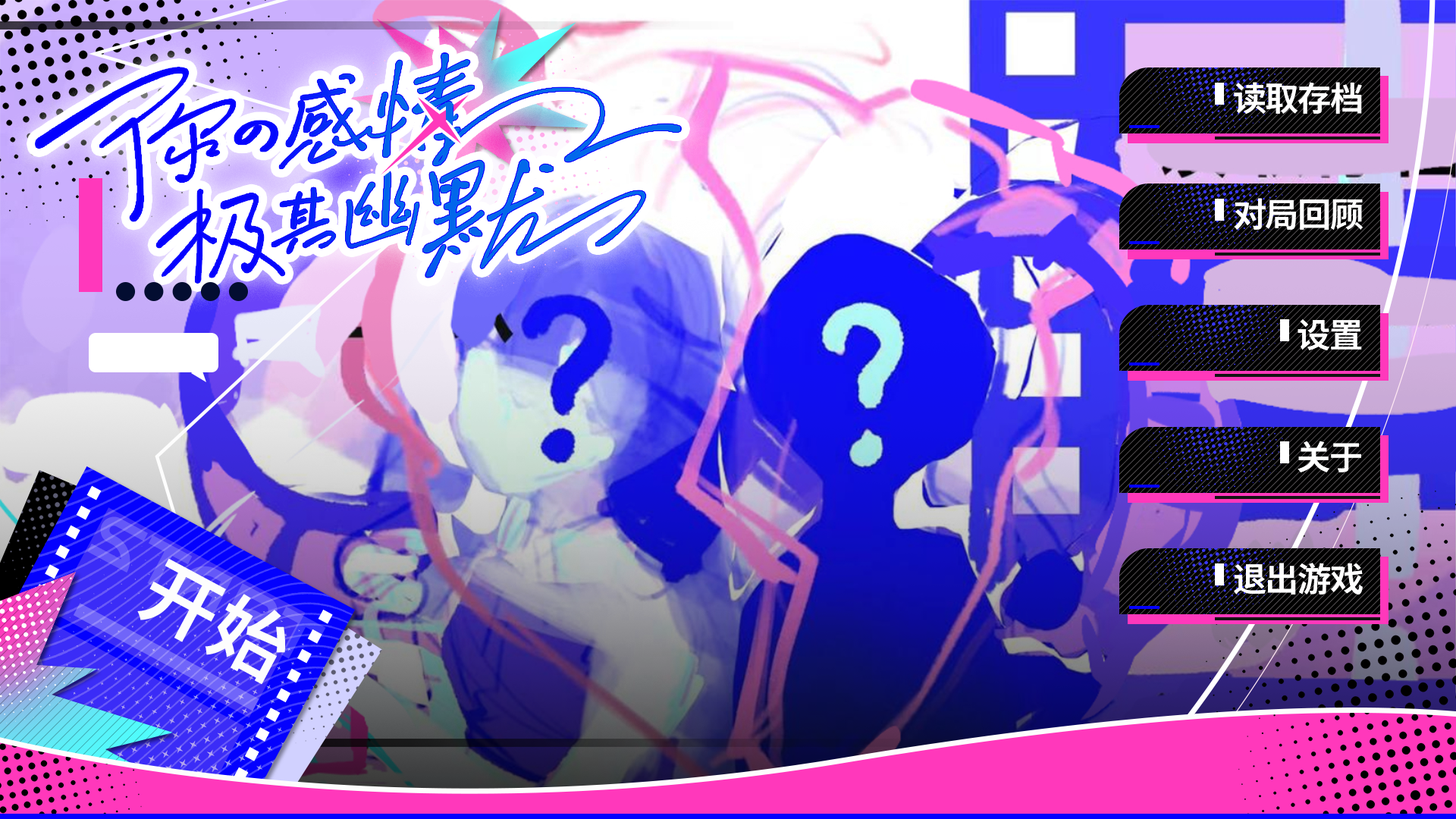
<style>
.page{position:relative;width:1456px;height:819px}
.page>*{position:absolute;margin:0}
.t1{font:33.5px "ChillDuanSans_SemiBold";letter-spacing:-0.03em;color:#ffffff}
.t2{font:76.5px "ChillDuanSans_SemiBold";letter-spacing:0.01em;color:#fdfdfd}
</style>
<div class="page">
<p class="t1" style="left:1234px;top:82px;width:128px;height:33px">读取存档</p>
<p class="t1" style="left:1234px;top:198px;width:129px;height:33px">对局回顾</p>
<p class="t1" style="left:1297px;top:319px;width:65px;height:31px">设置</p>
<p class="t1" style="left:1297px;top:441px;width:64px;height:31px">关于</p>
<p class="t2" style="left:137px;top:558px;width:148px;height:127px;rotate:28deg">开始</p>
<p class="t1" style="left:1234px;top:563px;width:129px;height:32px">退出游戏</p>
</div>
